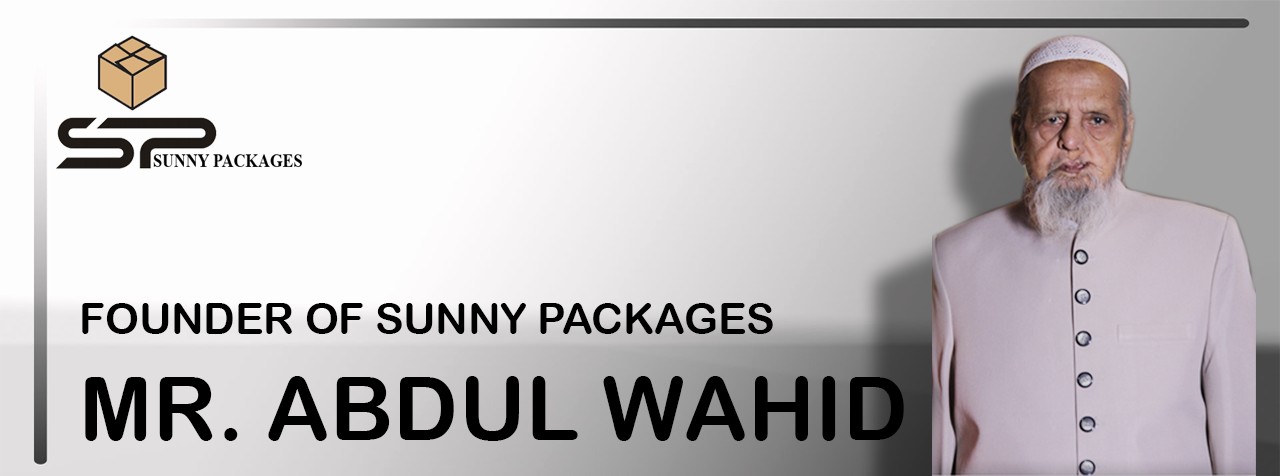
<style>
.page{position:relative;width:1280px;height:476px;background:#fdfdfd}
.page>*{position:absolute;margin:0}
.t1{font:42.5px "ArialRoundedMTBold";color:#000000}
.t2{font:88.4px "ArialRoundedMTBold";color:#000000}
</style>
<div class="page">
<p class="t1" style="left:82px;top:303px;width:822px;height:138px">FOUNDER OF SUNNY PACKAGES <br><span class="t2">MR. ABDUL WAHID</span></p>
</div>
